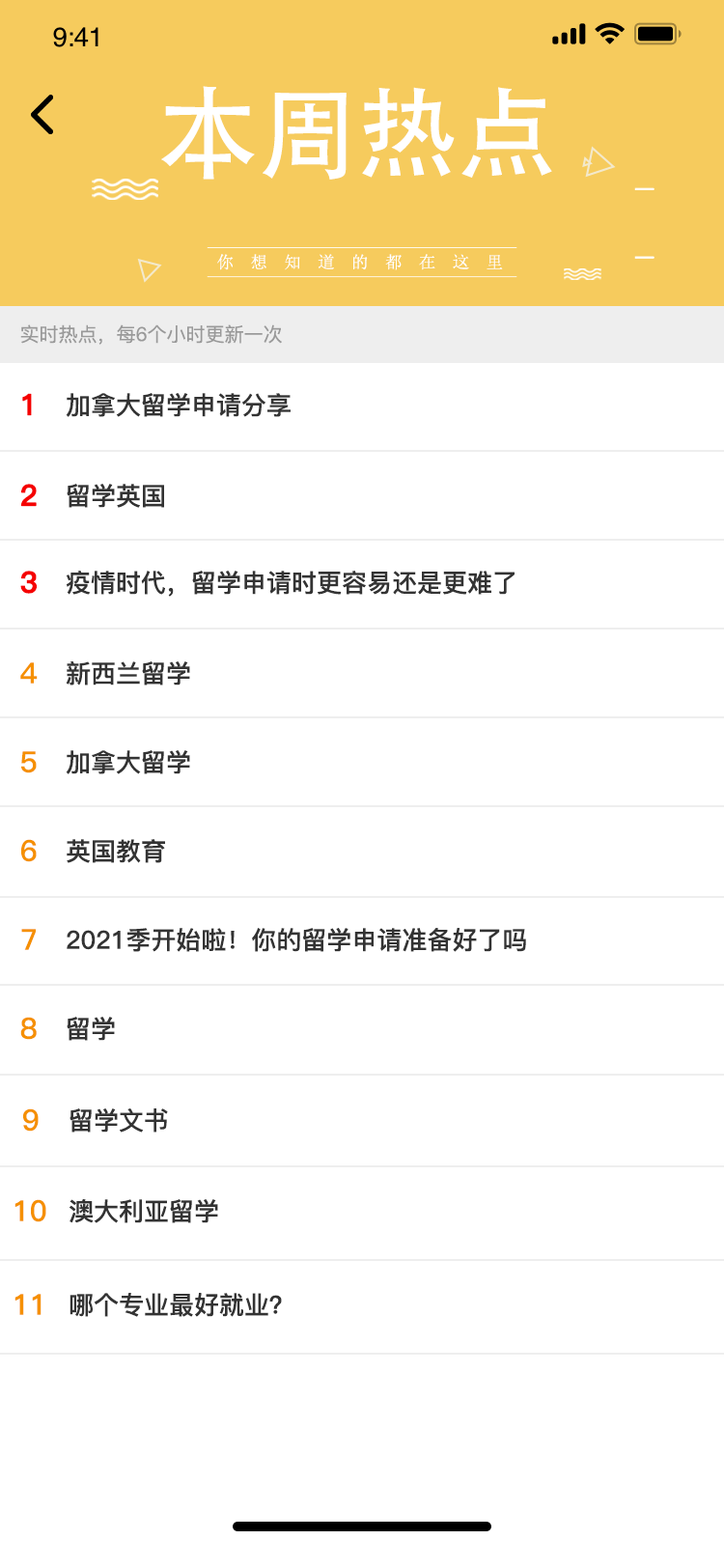
<style>
.page{position:relative;width:724px;height:1568px;background:#ffffff}
.page>*{position:absolute;margin:0}
.t1{font:100px "AdobeHeitiStd-Regular";color:#ffffff;text-transform:uppercase}
.t2{font:16.8px "SimSun";letter-spacing:1em;color:#ffffff;text-transform:uppercase}
.t3{font:19.3px "PingFang-SC-Medium";color:#999999}
.t4{font:29px "PingFang-SC-Bold";color:#f50000;font-weight:bold}
.t5{font:25.1px "PingFang-SC-Bold";color:#333333}
.t6{font:29px "PingFang-SC-Bold";color:#f59000}
</style>
<div class="page">
<p class="t1" style="left:161px;top:86px;width:391px;height:94px">本周热点</p>
<p class="t2" style="left:217px;top:254px;width:286px;height:16px">你想知道的都在这里</p>
<p class="t3" style="left:20px;top:324px;width:262px;height:21px">实时热点，每6个小时更新一次</p>
<p class="t4" style="left:22px;top:393px;width:10px;height:23px">1</p>
<p class="t5" style="left:66px;top:393px;width:225px;height:24px">加拿大留学申请分享</p>
<p class="t4" style="left:20px;top:484px;width:17px;height:23px">2</p>
<p class="t5" style="left:67px;top:484px;width:97px;height:24px">留学英国</p>
<p class="t4" style="left:20px;top:571px;width:17px;height:23px">3</p>
<p class="t5" style="left:66px;top:571px;width:449px;height:26px">疫情时代，留学申请时更容易还是更难了</p>
<p class="t6" style="left:20px;top:662px;width:18px;height:22px">4</p>
<p class="t5" style="left:66px;top:661px;width:124px;height:25px">新西兰留学</p>
<p class="t6" style="left:21px;top:751px;width:16px;height:22px">5</p>
<p class="t5" style="left:66px;top:750px;width:124px;height:24px">加拿大留学</p>
<p class="t6" style="left:21px;top:839px;width:16px;height:23px">6</p>
<p class="t5" style="left:67px;top:839px;width:98px;height:24px">英国教育</p>
<p class="t6" style="left:21px;top:929px;width:15px;height:21px">7</p>
<p class="t5" style="left:67px;top:928px;width:459px;height:24px">2021季开始啦！你的留学申请准备好了吗</p>
<p class="t6" style="left:20px;top:1017px;width:17px;height:23px">8</p>
<p class="t5" style="left:67px;top:1017px;width:48px;height:24px">留学</p>
<p class="t6" style="left:23px;top:1108px;width:16px;height:24px">9</p>
<p class="t5" style="left:70px;top:1108px;width:98px;height:25px">留学文书</p>
<p class="t6" style="left:14px;top:1199px;width:32px;height:23px">10</p>
<p class="t5" style="left:70px;top:1199px;width:148px;height:24px">澳大利亚留学</p>
<p class="t6" style="left:14px;top:1294px;width:28px;height:21px">11</p>
<p class="t5" style="left:70px;top:1293px;width:212px;height:24px">哪个专业最好就业？</p>
</div>
